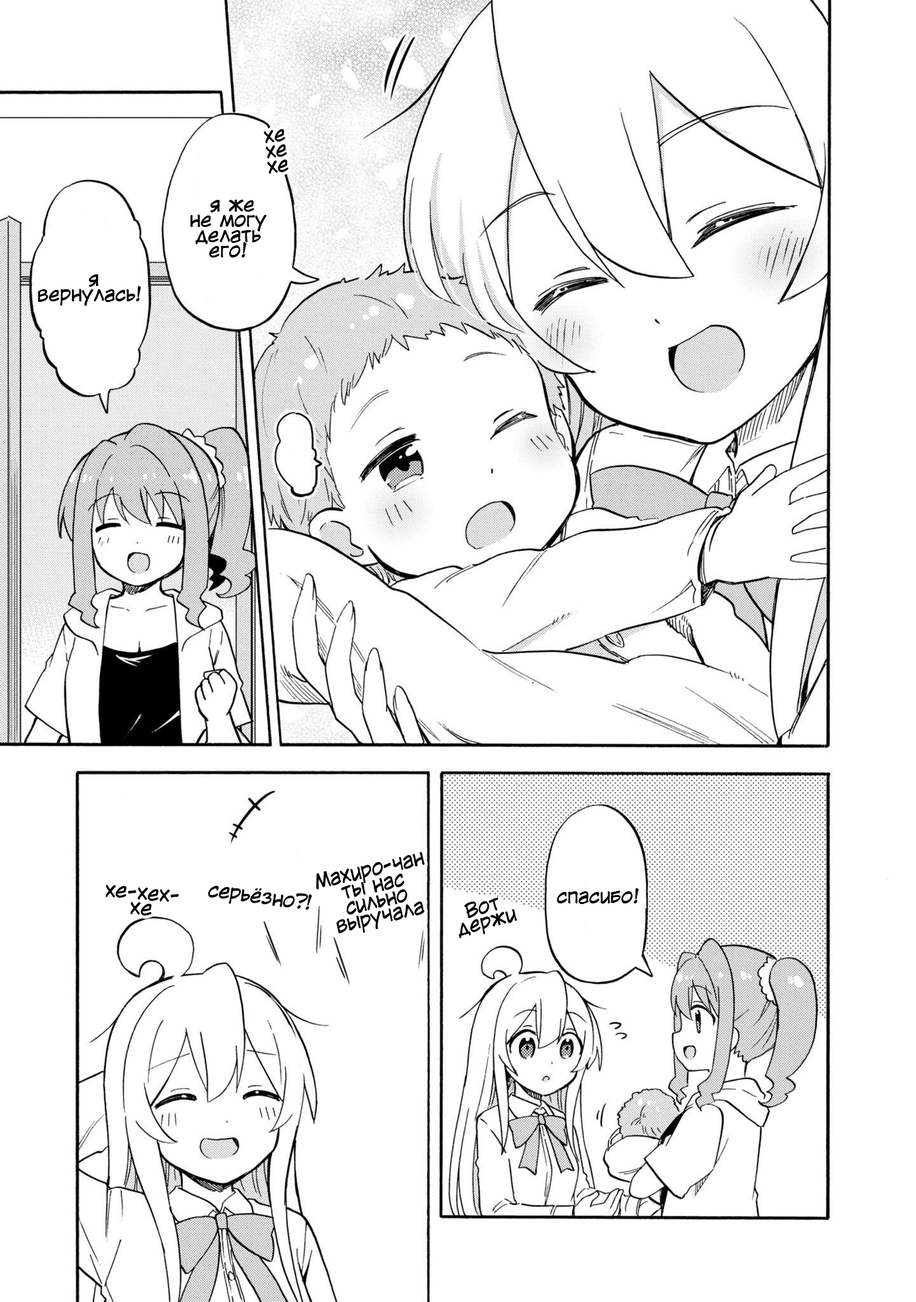
<style>
.page{position:relative;width:916px;height:1302px;background:#ffffff}
.page>*{position:absolute;margin:0}
.t1{font:19.1px/15.3px "KuraiVoice2";color:#000000}
.t2{font:20px/16px "KuraiVoice2";color:#000000;scale:0.94 1}
.t3{font:19.1px/15.3px "KuraiVoice2";color:#000000;scale:1.03 1}
.t4{font:19.1px "KuraiVoice2";color:#000000}
</style>
<div class="page">
<p class="t1" style="left:264px;top:129px;width:25px;height:45px;text-align:center;rotate:-6deg">хе<br>хе<br>хе</p>
<p class="t1" style="left:190px;top:199px;width:77px;height:58px;text-align:center">я же<br>не могу<br>делать<br>его!</p>
<p class="t1" style="left:38px;top:274px;width:103px;height:32px;text-align:center">я<br>вернулась!</p>
<p class="t2" style="left:316px;top:852px;width:109px;height:82px;text-align:center;rotate:-13deg">Махиро-чан<br>ты нас<br>сильно<br>выручала</p>
<p class="t3" style="left:106px;top:884px;width:73px;height:32px;text-align:center;rotate:5deg">хе-хех-<br>хе</p>
<p class="t4" style="left:208px;top:885px;width:104px;height:25px;rotate:8deg">серьёзно?!</p>
<p class="t4" style="left:557px;top:888px;width:82px;height:16px">спасибо!</p>
<p class="t1" style="left:458px;top:898px;width:59px;height:40px;text-align:center;rotate:-15deg">Вот<br>держи</p>
</div>
